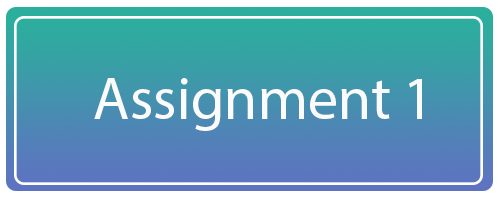
<style>
.page{position:relative;width:500px;height:200px}
.page>*{position:absolute;margin:0}
.t1{font:60.1px "MyriadHebrew-Regular";color:#fbfbfb}
</style>
<div class="page">
<p class="t1" style="left:94px;top:78px;width:328px;height:53px">Assignment 1</p>
</div>
